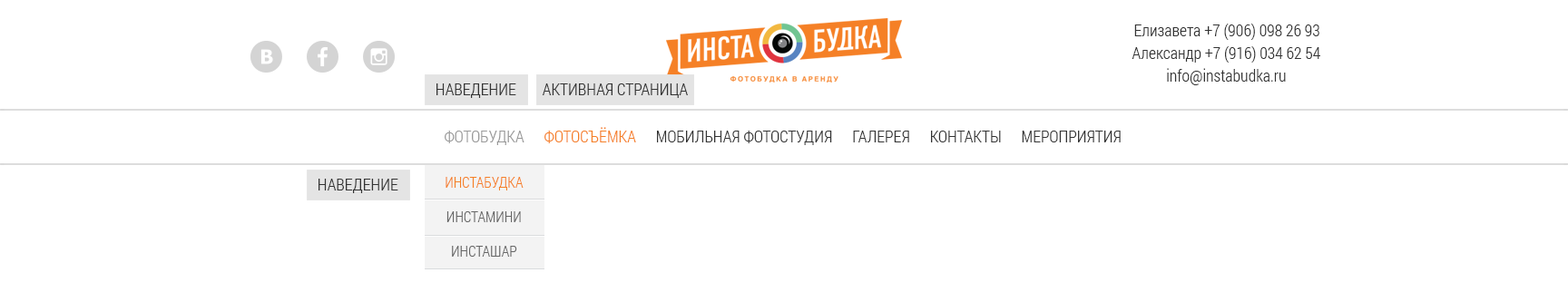
<style>
.page{position:relative;width:1568px;height:302px;background:#ffffff}
.page>*{position:absolute;margin:0}
.t1{font:16.3px/22.6px "RobotoCondensed-Light";color:#333333}
.t2{font:16.3px "RobotoCondensed-Light";color:#333333;text-transform:uppercase}
.t3{font:16.3px "RobotoCondensed-Light";color:#999999;text-transform:uppercase}
.t4{font:16.3px "RobotoCondensed-Light";color:#f58026;text-transform:uppercase}
.t5{font:14.5px/34.5px "RobotoCondensed-Light";color:#666666;text-transform:uppercase}
.t6{font:14.5px/34.5px "RobotoCondensed-Light";color:#f58026;text-transform:uppercase}
</style>
<div class="page">
<p class="t1" style="left:1132px;top:24px;width:188px;height:61px;text-align:center">Елизавета +7 (906) 098 26 93<br>Александр +7 (916) 034 62 54<br>info@instabudka.ru</p>
<p class="t2" style="left:436px;top:83px;width:80px;height:15px">наведение</p>
<p class="t2" style="left:542px;top:83px;width:146px;height:15px">активная страница</p>
<p class="t2" style="left:445px;top:127px;width:676px;height:18px"><span class="t3">фотобудка </span><span class="t4">фотосъёмка </span>мобильная фотостудия галерея контакты мероприятия</p>
<p class="t2" style="left:318px;top:179px;width:80px;height:14px">наведение</p>
<p class="t5" style="left:446px;top:177px;width:78px;height:80px;text-align:center"><span class="t6">инстабудка<br></span>инстамини<br>инсташар</p>
</div>
